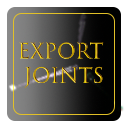
<style>
.page{position:relative;width:128px;height:128px;background:#ffffff}
.page>*{position:absolute;margin:0}
.t1{font:20.3px "TrajanColor-Concept"}
</style>
<div class="page">
<p class="t1" style="left:19px;top:42px;width:85px;height:46px;text-align:center">Export <br>Joints</p>
</div>
